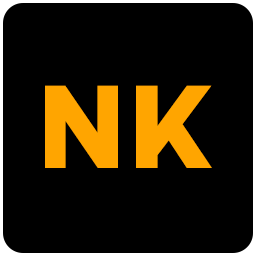
<style>
.page{position:relative;width:256px;height:256px;background:#000000}
.page>*{position:absolute;margin:0}
.t1{font:117.6px "Marsden-Bold";letter-spacing:-0.005em;color:#ffa500}
</style>
<div class="page">
<p class="t1" style="left:45px;top:85px;width:167px;height:83px">NK</p>
</div>
